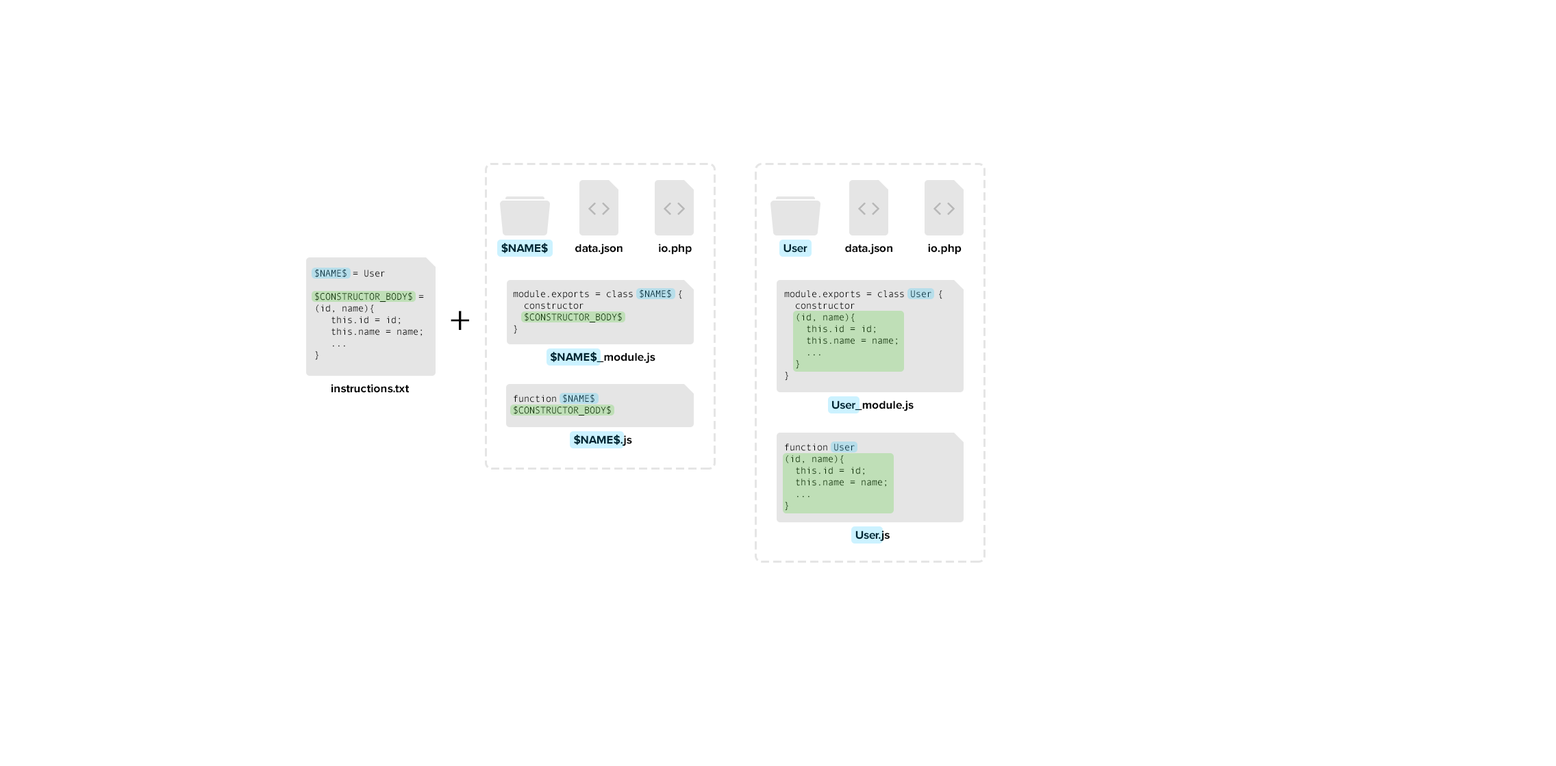
<style>
.page{position:relative;width:1556px;height:766px;background:#ffffff}
.page>*{position:absolute;margin:0}
.t1{font:11.6px "ProximaNova-Bold";color:#002633}
.t2{font:11.6px "ProximaNova-Bold";color:#000000}
.t3{font:9.6px/11.6px "AndaleMono"}
.t4{font:40.6px "ProximaNova-Regular";color:#000000}
.t5{font:11.6px "ProximaNova-Bold"}
.t6{font:9.6px/11.6px "AndaleMono";color:#082800}
</style>
<div class="page">
<p class="t1" style="left:501px;top:243px;width:47px;height:10px">$NAME$</p>
<p class="t2" style="left:575px;top:244px;width:48px;height:11px">data.json</p>
<p class="t2" style="left:659px;top:244px;width:33px;height:11px">io.php</p>
<p class="t1" style="left:783px;top:244px;width:24px;height:9px">User</p>
<p class="t2" style="left:845px;top:244px;width:47px;height:11px">data.json</p>
<p class="t2" style="left:928px;top:244px;width:34px;height:11px">io.php</p>
<p class="t3" style="left:315px;top:269px;width:109px;height:91px">$NAME$ = User<br><br>$CONSTRUCTOR_BODY$ =<br>(id, name){<br>   this.id = id;<br>   this.name = name;<br>   ...<br>}</p>
<p class="t3" style="left:513px;top:290px;width:169px;height:44px">module.exports = class $NAME$ {<br>  constructor<br>  $CONSTRUCTOR_BODY$<br>}</p>
<p class="t3" style="left:784px;top:290px;width:158px;height:91px">module.exports = class User {<br>  constructor<br>  (id, name){<br>    this.id = id;<br>    this.name = name;<br>    ...<br>  }<br>}</p>
<p class="t4" style="left:451px;top:311px;width:18px;height:19px">+</p>
<p class="t5" style="left:550px;top:352px;width:105px;height:12px">$NAME$_module.js</p>
<p class="t2" style="left:331px;top:384px;width:79px;height:9px">instructions.txt</p>
<p class="t3" style="left:514px;top:394px;width:97px;height:22px">function $NAME$<br>$CONSTRUCTOR_BODY$</p>
<p class="t2" style="left:832px;top:401px;width:82px;height:11px">User_module.js</p>
<p class="t1" style="left:574px;top:435px;width:58px;height:12px">$NAME$.js</p>
<p class="t6" style="left:785px;top:444px;width:101px;height:67px">function User<br>(id, name){<br>  this.id = id;<br>  this.name = name;<br>  ...<br>}</p>
<p class="t1" style="left:855px;top:531px;width:35px;height:11px">User.js</p>
</div>
